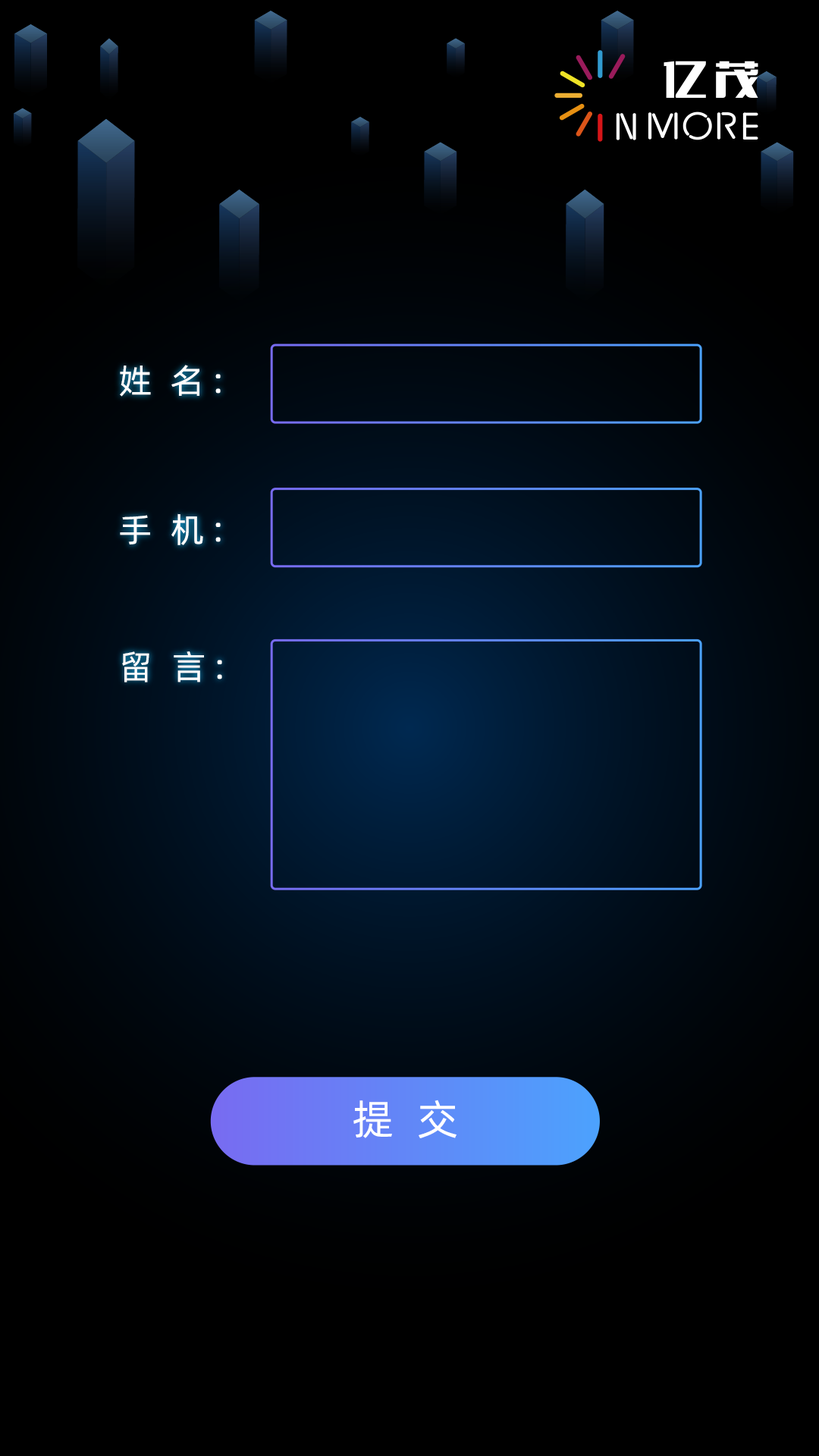
<style>
.page{position:relative;width:819px;height:1456px;background:#000000}
.page>*{position:absolute;margin:0}
.t1{font:34.1px "AlibabaPuHuiTi-Regular";letter-spacing:0.15em;color:#ffffff}
.t2{font:41.7px "AlibabaPuHuiTi-Regular";letter-spacing:0.15em;color:#ffffff}
</style>
<div class="page">
<p class="t1" style="left:120px;top:365px;width:101px;height:32px">姓 名：</p>
<p class="t1" style="left:120px;top:513px;width:101px;height:32px">手 机：</p>
<p class="t1" style="left:122px;top:651px;width:100px;height:31px">留 言：</p>
<p class="t2" style="left:353px;top:1100px;width:104px;height:38px">提 交</p>
</div>
